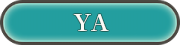
<style>
.page{position:relative;width:180px;height:45px;background:#239e9f}
.page>*{position:absolute;margin:0}
.t1{font:23px "RyuminPro-ExBold";color:#ffffff}
</style>
<div class="page">
<p class="t1" style="left:73px;top:14px;width:36px;height:17px">YA</p>
</div>
